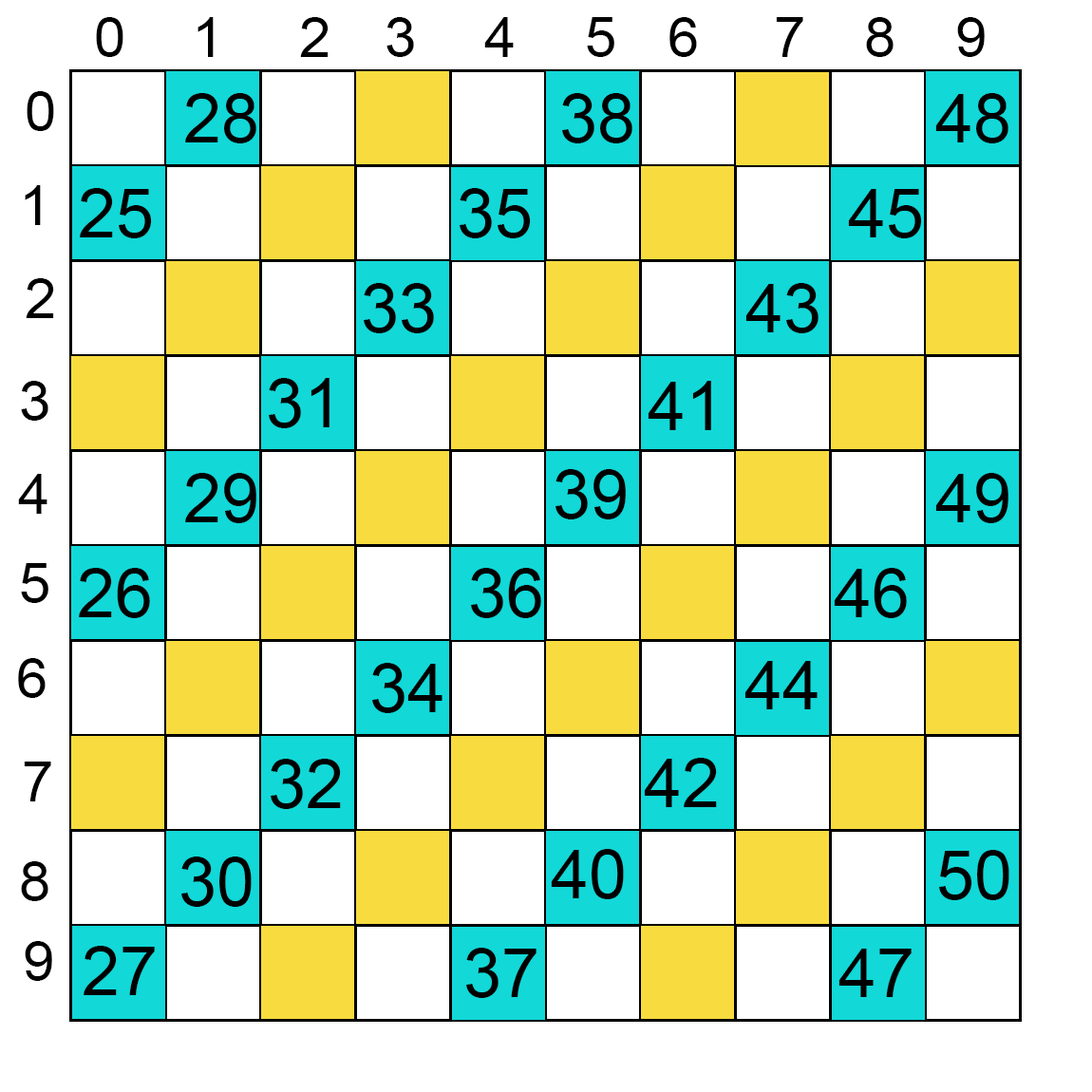
<style>
.page{position:relative;width:1092px;height:1092px;background:#ffffff}
.page>*{position:absolute;margin:0}
.t1{font:57px "ArialMT";color:#000000}
.t2{font:68.4px "ArialMT";color:#000000}
</style>
<div class="page">
<p class="t1" style="left:96px;top:17px;width:27px;height:40px">0</p>
<p class="t1" style="left:198px;top:17px;width:16px;height:40px">1</p>
<p class="t1" style="left:300px;top:17px;width:29px;height:40px">2</p>
<p class="t1" style="left:386px;top:17px;width:28px;height:40px">3</p>
<p class="t1" style="left:484px;top:17px;width:30px;height:40px">4</p>
<p class="t1" style="left:587px;top:17px;width:27px;height:40px">5</p>
<p class="t1" style="left:669px;top:17px;width:28px;height:40px">6</p>
<p class="t1" style="left:776px;top:17px;width:27px;height:40px">7</p>
<p class="t1" style="left:866px;top:17px;width:28px;height:40px">8</p>
<p class="t1" style="left:957px;top:17px;width:28px;height:40px">9</p>
<p class="t1" style="left:27px;top:91px;width:27px;height:40px">0</p>
<p class="t2" style="left:185px;top:93px;width:71px;height:50px">28</p>
<p class="t2" style="left:562px;top:93px;width:70px;height:50px">38</p>
<p class="t2" style="left:935px;top:93px;width:73px;height:50px">48</p>
<p class="t1" style="left:25px;top:185px;width:16px;height:40px">1</p>
<p class="t2" style="left:80px;top:188px;width:72px;height:50px">25</p>
<p class="t2" style="left:460px;top:188px;width:71px;height:50px">35</p>
<p class="t2" style="left:848px;top:189px;width:74px;height:49px">45</p>
<p class="t1" style="left:26px;top:278px;width:28px;height:40px">2</p>
<p class="t2" style="left:364px;top:283px;width:70px;height:50px">33</p>
<p class="t2" style="left:745px;top:283px;width:74px;height:50px">43</p>
<p class="t2" style="left:269px;top:378px;width:60px;height:50px">31</p>
<p class="t1" style="left:21px;top:381px;width:27px;height:40px">3</p>
<p class="t2" style="left:648px;top:381px;width:63px;height:49px">41</p>
<p class="t1" style="left:18px;top:474px;width:29px;height:40px">4</p>
<p class="t2" style="left:185px;top:473px;width:71px;height:50px">29</p>
<p class="t2" style="left:555px;top:469px;width:71px;height:50px">39</p>
<p class="t2" style="left:935px;top:473px;width:73px;height:50px">49</p>
<p class="t1" style="left:21px;top:563px;width:27px;height:40px">5</p>
<p class="t2" style="left:79px;top:568px;width:71px;height:50px">26</p>
<p class="t2" style="left:471px;top:568px;width:70px;height:50px">36</p>
<p class="t2" style="left:834px;top:568px;width:73px;height:50px">46</p>
<p class="t1" style="left:18px;top:658px;width:28px;height:40px">6</p>
<p class="t2" style="left:372px;top:663px;width:70px;height:50px">34</p>
<p class="t2" style="left:744px;top:661px;width:74px;height:48px">44</p>
<p class="t1" style="left:24px;top:762px;width:27px;height:39px">7</p>
<p class="t2" style="left:271px;top:759px;width:70px;height:50px">32</p>
<p class="t2" style="left:644px;top:758px;width:73px;height:49px">42</p>
<p class="t2" style="left:181px;top:856px;width:71px;height:51px">30</p>
<p class="t2" style="left:551px;top:849px;width:73px;height:50px">40</p>
<p class="t2" style="left:939px;top:850px;width:70px;height:50px">50</p>
<p class="t1" style="left:21px;top:861px;width:27px;height:40px">8</p>
<p class="t1" style="left:25px;top:941px;width:27px;height:40px">9</p>
<p class="t2" style="left:84px;top:946px;width:71px;height:49px">27</p>
<p class="t2" style="left:466px;top:948px;width:70px;height:50px">37</p>
<p class="t2" style="left:838px;top:949px;width:74px;height:48px">47</p>
</div>
